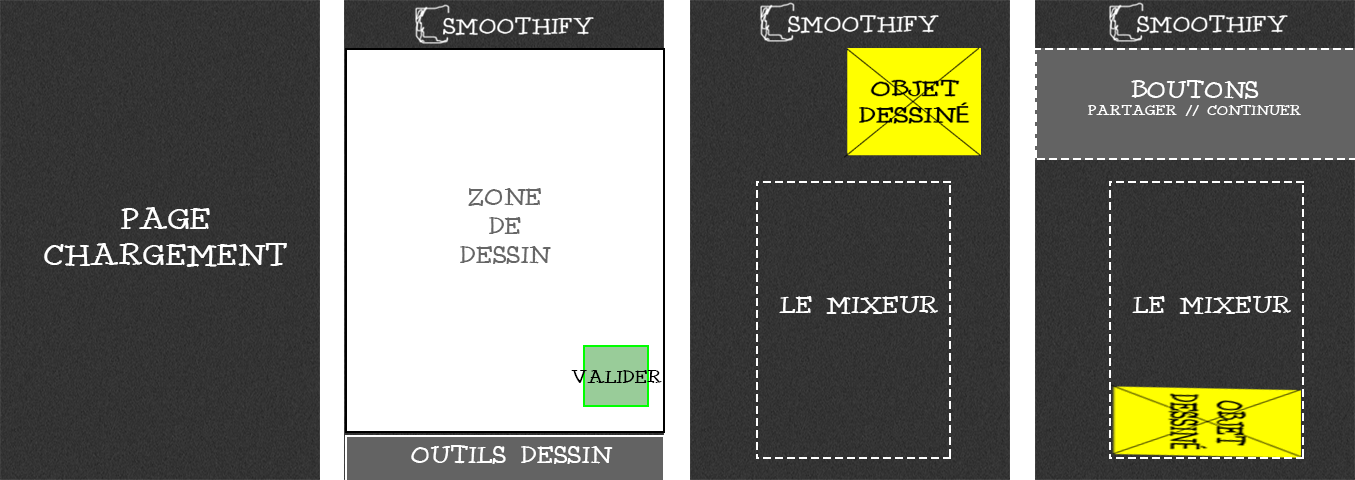
<style>
.page{position:relative;width:1355px;height:480px;background:#ffffff}
.page>*{position:absolute;margin:0}
.t1{font:15.4px "Idolwild";color:#ffffff;text-transform:uppercase;scale:1.1 1}
.t2{font:26.4px "Idolwild";color:#ffffff;text-transform:uppercase;scale:1.1 1}
.t3{font:26.4px "Idolwild";color:#666666;text-transform:uppercase;scale:1.1 1}
.t4{font:33px "Idolwild";color:#ffffff;text-transform:uppercase;scale:1.1 1}
.t5{font:19.8px "Idolwild";color:#000000;text-transform:uppercase;scale:1.1 1}
.t6{font:26.3px "Idolwild";color:#ffffff;text-transform:uppercase;scale:1.1 1}
</style>
<div class="page">
<p class="t1" style="left:1087px;top:80px;width:214px;height:36px;text-align:center"><span class="t2">Boutons<br></span>Partager // Continuer</p>
<p class="t3" style="left:460px;top:188px;width:91px;height:76px;text-align:center">Zone<br>de<br>Dessin</p>
<p class="t4" style="left:44px;top:207px;width:243px;height:60px;text-align:center">Page<br>Chargement</p>
<p class="t2" style="left:779px;top:296px;width:159px;height:18px">Le mixeur</p>
<p class="t5" style="left:571px;top:370px;width:91px;height:13px">Valider</p>
<p class="t6" style="left:411px;top:445px;width:202px;height:19px">Outils dessin</p>
</div>
